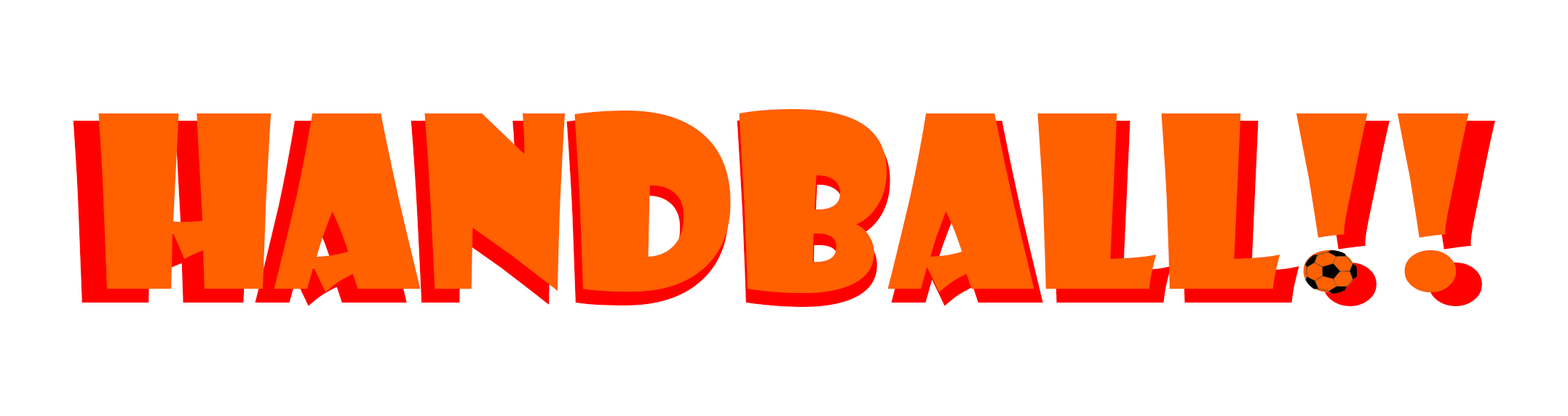
<style>
.page{position:relative;width:1568px;height:416px;background:#ffffff}
.page>*{position:absolute;margin:0}
.t1{font:233.8px "ShowcardGothic-Reg";color:#ff6000}
.t2{font:242.7px "ShowcardGothic-Reg";color:#ff6000}
</style>
<div class="page">
<p class="t1" style="left:98px;top:109px;width:1371px;height:184px">HANDBALL!!</p>
<p class="t2" style="left:73px;top:116px;width:1422px;height:191px">HANDBALL!!</p>
</div>
